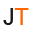
<style>
.page{position:relative;width:32px;height:32px;background:#ffffff}
.page>*{position:absolute;margin:0}
.t1{font:26px "Raavi";color:#181818}
.t2{font:26px "Raavi";color:#ff6600}
</style>
<div class="page">
<p class="t1" style="left:3px;top:8px;width:26px;height:17px">J<span class="t2">T</span></p>
</div>
